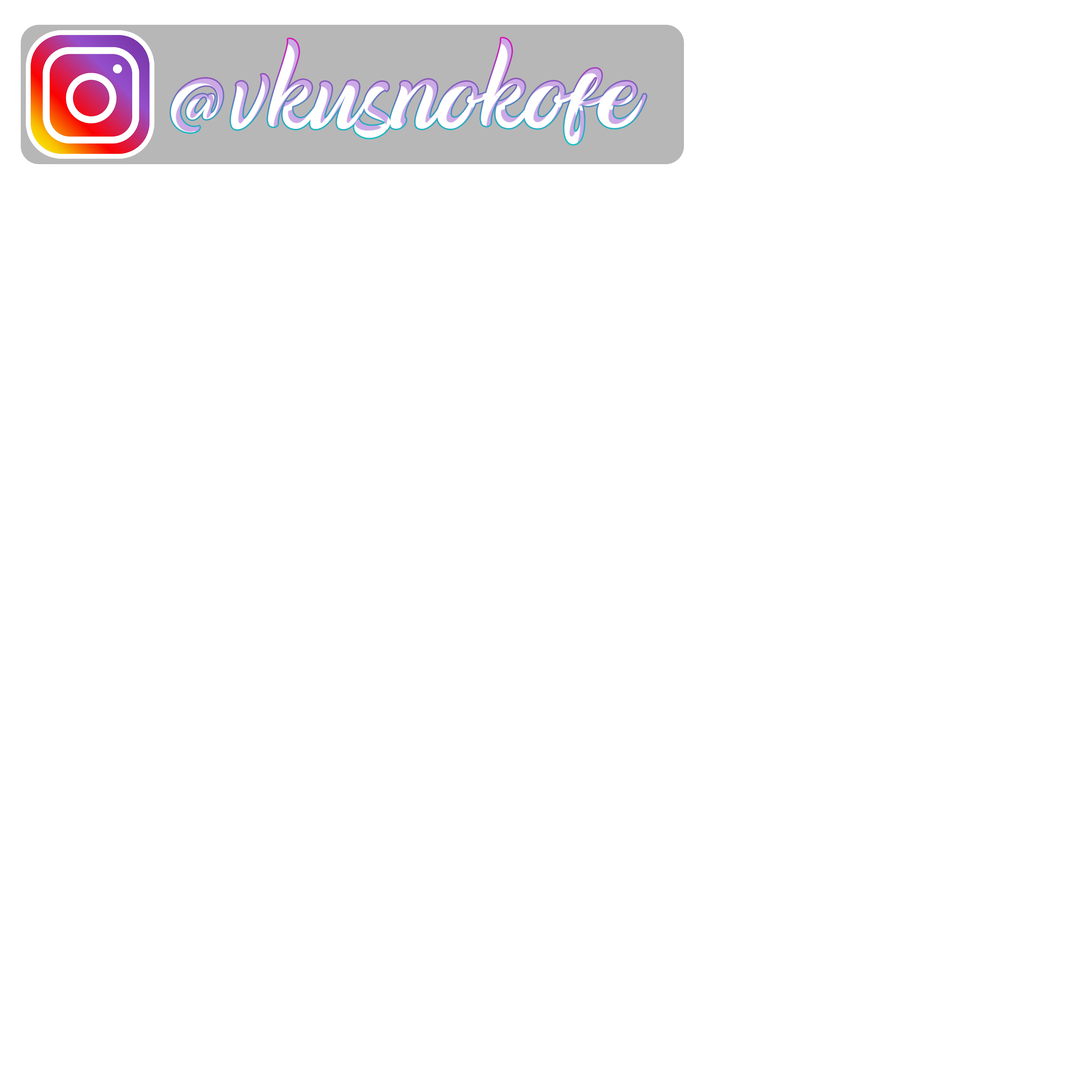
<style>
.page{position:relative;width:1092px;height:1092px;background:#ffffff}
.page>*{position:absolute;margin:0}
.t1{font:108.9px "Amigos";scale:1.08 1}
</style>
<div class="page">
<p class="t1" style="left:171px;top:38px;width:475px;height:106px">@vkusnokofe</p>
</div>
